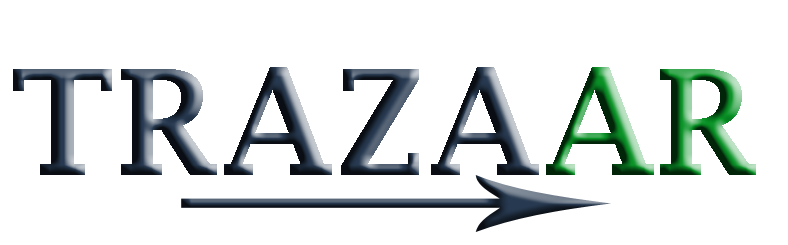
<style>
.page{position:relative;width:788px;height:245px;background:#ffffff}
.page>*{position:absolute;margin:0}
.t1{font:146.6px "LucidaFax-Demi"}
</style>
<div class="page">
<p class="t1" style="left:13px;top:67px;width:526px;height:108px">TRAZA</p>
<p class="t1" style="left:546px;top:67px;width:210px;height:108px">AR</p>
</div>
